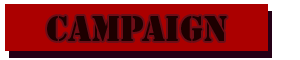
<style>
.page{position:relative;width:300px;height:60px;background:#ab0000}
.page>*{position:absolute;margin:0}
.t1{font:33.3px "StencilStd";color:#1d0000}
</style>
<div class="page">
<p class="t1" style="left:47px;top:16px;width:180px;height:25px">CaMPAIGN</p>
</div>
